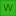
<style>
.page{position:relative;width:16px;height:16px;background:#32ba20}
.page>*{position:absolute;margin:0}
.t1{font:9.6px "ArialMT";color:#215206}
</style>
<div class="page">
<p class="t1" style="left:3px;top:4px;width:10px;height:7px">W</p>
</div>
